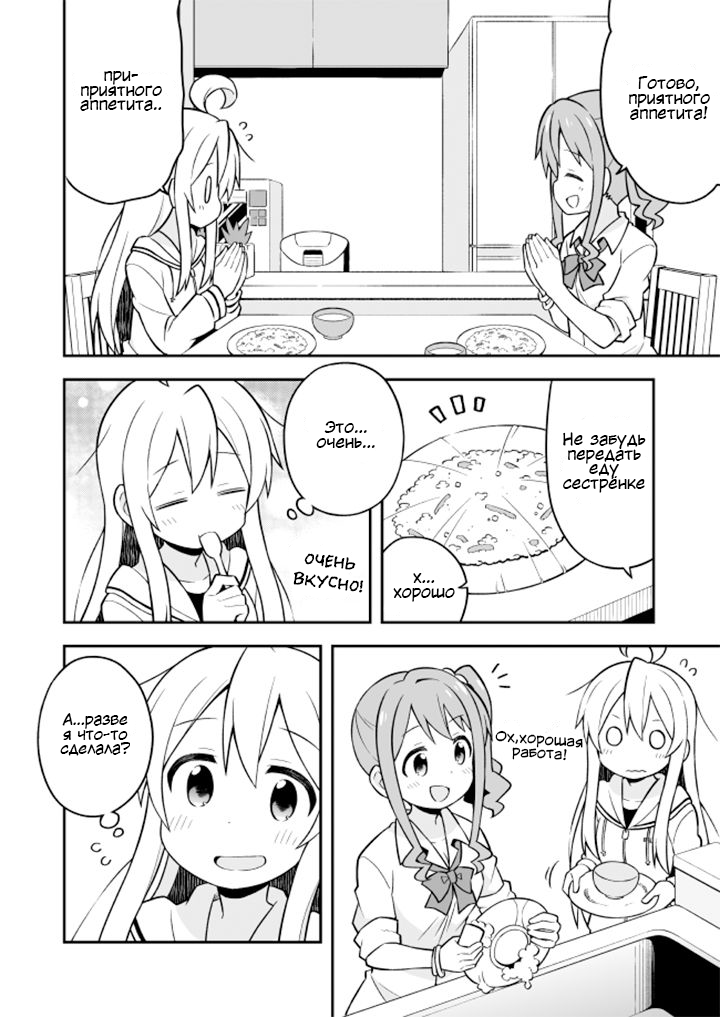
<style>
.page{position:relative;width:720px;height:1017px;background:#ffffff}
.page>*{position:absolute;margin:0}
.t1{font:16px/14.7px "KuraiVoice2";color:#000000}
.t2{font:18.7px/21.3px "el_CCEvilSchemes";color:#000000}
.t3{font:14.7px/14.7px "KuraiVoice2";color:#000000}
.t4{font:13.8px/13.8px "KuraiVoice2";color:#000000;scale:1.06 1}
</style>
<div class="page">
<p class="t1" style="left:80px;top:71px;width:82px;height:40px;text-align:center">при-<br>приятного<br>аппетита..</p>
<p class="t1" style="left:629px;top:76px;width:81px;height:44px;text-align:center">Готово,<br>приятного<br>аппетита!</p>
<p class="t1" style="left:316px;top:421px;width:59px;height:27px;text-align:center">Это...<br>очень...</p>
<p class="t1" style="left:563px;top:432px;width:83px;height:61px;text-align:center">Не забудь<br>передать<br>еду<br>сестрёнке</p>
<p class="t2" style="left:293px;top:553px;width:71px;height:40px;text-align:center;rotate:6deg">Очень<br>вкусно!</p>
<p class="t1" style="left:393px;top:573px;width:62px;height:29px;text-align:center">х...<br>хорошо</p>
<p class="t3" style="left:60px;top:713px;width:70px;height:43px;text-align:center">А...разве<br>я что-то<br>сделала?</p>
<p class="t4" style="left:495px;top:730px;width:88px;height:31px;text-align:center;rotate:4deg">Ох,хорошая<br>работа!</p>
</div>
